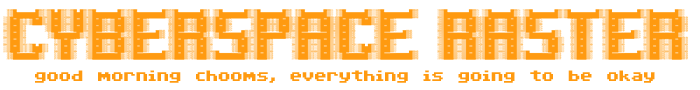
<style>
.page{position:relative;width:700px;height:90px;background:#ffffff}
.page>*{position:absolute;margin:0}
.t1{font:14px "C64Pro";color:#ff9a10}
</style>
<div class="page">
<p class="t1" style="left:35px;top:70px;width:620px;height:13px">good morning chooms, everything is going to be okay</p>
</div>
